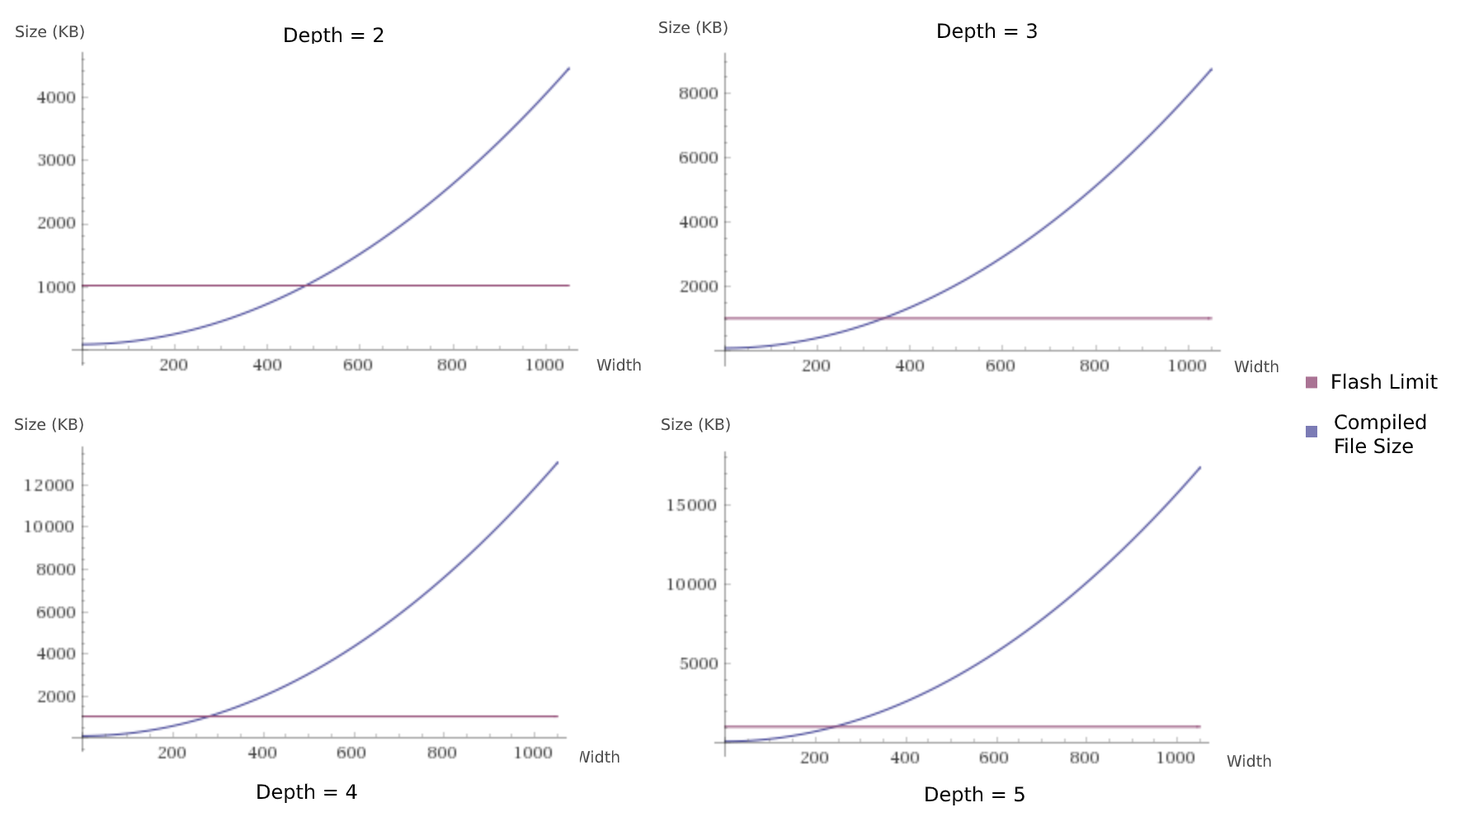
<style>
.page{position:relative;width:1460px;height:817px;background:#ffffff}
.page>*{position:absolute;margin:0}
.t1{font:15.7px "DejaVuSans";color:#464646}
.t2{font:19.8px "DejaVuSans";color:#000000}
</style>
<div class="page">
<p class="t1" style="left:16px;top:25px;width:68px;height:15px">Size (KB)</p>
<p class="t2" style="left:285px;top:26px;width:99px;height:20px">Depth = 2</p>
<p class="t1" style="left:659px;top:21px;width:69px;height:14px">Size (KB)</p>
<p class="t2" style="left:938px;top:22px;width:99px;height:20px">Depth = 3</p>
<p class="t1" style="left:596px;top:358px;width:45px;height:13px">Width</p>
<p class="t1" style="left:1234px;top:360px;width:45px;height:13px">Width</p>
<p class="t2" style="left:1332px;top:373px;width:106px;height:16px">Flash Limit</p>
<p class="t2" style="left:1335px;top:413px;width:91px;height:41px">Compiled<br>File Size</p>
<p class="t1" style="left:15px;top:417px;width:68px;height:15px">Size (KB)</p>
<p class="t1" style="left:662px;top:417px;width:68px;height:15px">Size (KB)</p>
<p class="t1" style="left:575px;top:750px;width:45px;height:13px">Width</p>
<p class="t1" style="left:1227px;top:754px;width:44px;height:13px">Width</p>
<p class="t2" style="left:257px;top:783px;width:100px;height:20px">Depth = 4</p>
<p class="t2" style="left:926px;top:785px;width:99px;height:20px">Depth = 5</p>
</div>
